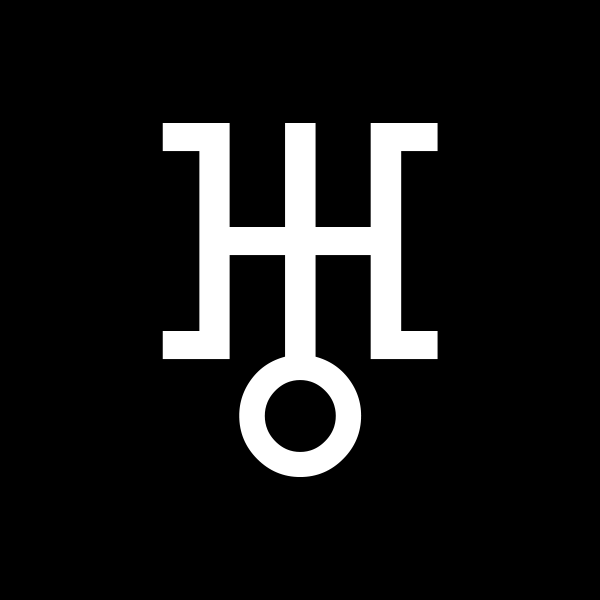
<style>
.page{position:relative;width:600px;height:600px;background:#000000}
.page>*{position:absolute;margin:0}
.t1{font:506.5px "ArialUnicodeMS";color:#ffffff}
</style>
<div class="page">
<p class="t1" style="left:162px;top:123px;width:276px;height:354px">♅</p>
</div>
